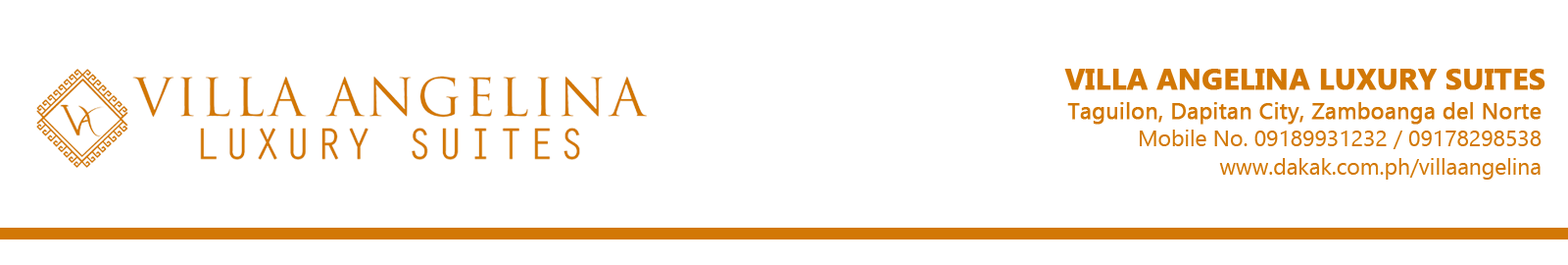
<style>
.page{position:relative;width:1568px;height:265px;background:#ffffff}
.page>*{position:absolute;margin:0}
.t1{font:29.1px "Gadugi-Bold";color:#d27806;font-weight:bold}
.t2{font:22.5px/28px "Gadugi";color:#d27806}
.t3{font:22.5px/28px "Gadugi";color:#d27806;font-weight:bold}
</style>
<div class="page">
<p class="t1" style="left:1064px;top:69px;width:481px;height:21px">VILLA ANGELINA LUXURY SUITES</p>
<p class="t2" style="left:1067px;top:102px;width:475px;height:77px;text-align:right"><span class="t3">Taguilon, Dapitan City, Zamboanga del Norte<br></span>Mobile No. 09189931232 / 09178298538<br>www.dakak.com.ph/villaangelina</p>
</div>
